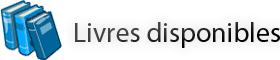
<style>
.page{position:relative;width:280px;height:60px;background:#ffffff}
.page>*{position:absolute;margin:0}
.t1{font:28px "MyriadPro-Regular"}
</style>
<div class="page">
<p class="t1" style="left:75px;top:22px;width:205px;height:26px">Livres disponibles</p>
</div>
